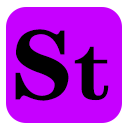
<style>
.page{position:relative;width:128px;height:128px;background:#c600ff}
.page>*{position:absolute;margin:0}
.t1{font:100px "FZCHSJW--GB1-0";color:#000000}
.t2{font:83.3px "FZCHSJW--GB1-0";color:#000000}
</style>
<div class="page">
<p class="t1" style="left:15px;top:29px;width:54px;height:72px">S</p>
<p class="t2" style="left:74px;top:46px;width:35px;height:55px">t</p>
</div>
